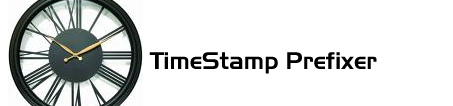
<style>
.page{position:relative;width:453px;height:106px;background:#ffffff}
.page>*{position:absolute;margin:0}
.t1{font:24px "Slicker";color:#000000}
</style>
<div class="page">
<p class="t1" style="left:149px;top:52px;width:228px;height:22px">TimeStamp Prefixer</p>
</div>
